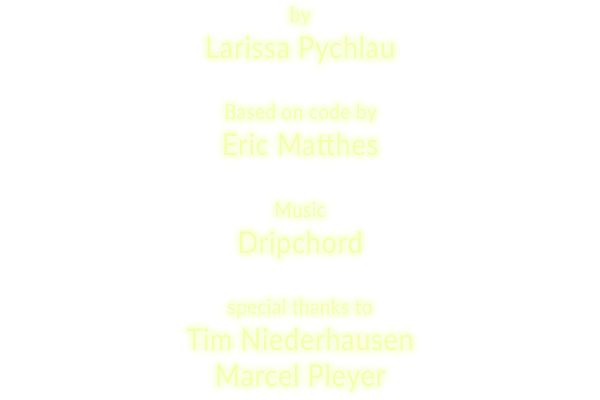
<style>
.page{position:relative;width:600px;height:400px;background:#ffffff}
.page>*{position:absolute;margin:0}
.t1{font:30.1px "Lato-Regular";letter-spacing:0.025em;color:#f4ffa8;scale:0.9 1}
.t2{font:20.8px "Lato-Regular";letter-spacing:0.025em;color:#f4ffa8;scale:0.9 1}
</style>
<div class="page">
<p class="t1" style="left:187px;top:6px;width:225px;height:386px;text-align:center"><span class="t2">by</span> <br>Larissa Pychlau<br> <br><span class="t2">Based on code by <br></span>Eric Matthes<br><br><span class="t2">Music <br></span>Dripchord<br><br><span class="t2">special thanks to <br></span>Tim Niederhausen<br>Marcel Pleyer</p>
</div>
